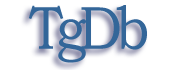
<style>
.page{position:relative;width:177px;height:70px;background:#ffffff}
.page>*{position:absolute;margin:0}
.t1{font:61px "BookmanOldStyle";letter-spacing:-0.13em;color:#336699;scale:0.9 1}
</style>
<div class="page">
<p class="t1" style="left:28px;top:5px;width:119px;height:58px">TgDb</p>
</div>
